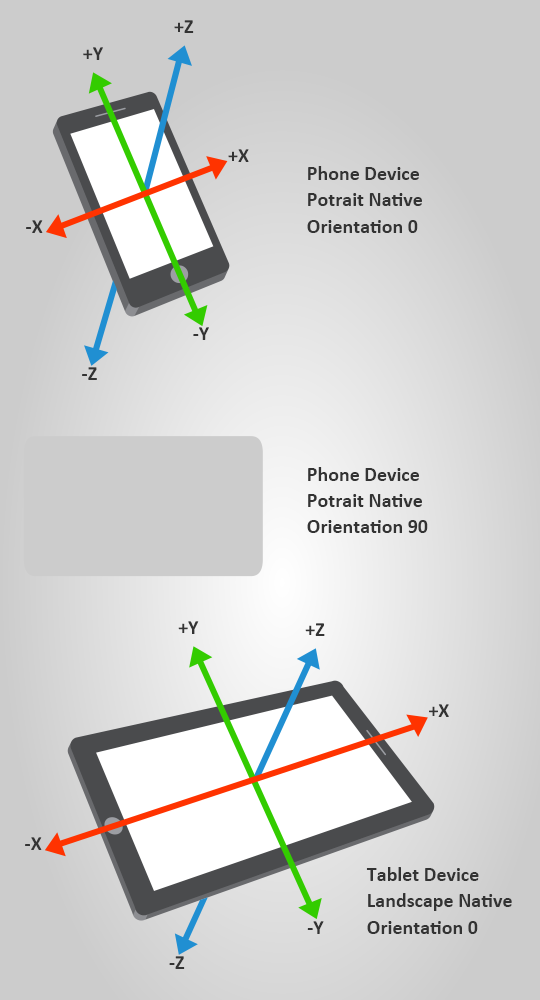
<style>
.page{position:relative;width:540px;height:1000px;background:#cccccc}
.page>*{position:absolute;margin:0}
.t1{font:20px "Calibri-Bold";color:#333333}
.t2{font:20px/26.4px "Calibri-Bold";color:#333333}
</style>
<div class="page">
<p class="t1" style="left:174px;top:20px;width:20px;height:13px">+Z</p>
<p class="t1" style="left:83px;top:47px;width:20px;height:13px">+Y</p>
<p class="t1" style="left:228px;top:149px;width:21px;height:13px">+X</p>
<p class="t2" style="left:307px;top:166px;width:115px;height:67px">Phone Device<br>Potrait Native<br>Orientation 0</p>
<p class="t1" style="left:26px;top:220px;width:17px;height:13px">-X</p>
<p class="t1" style="left:193px;top:327px;width:16px;height:13px">-Y</p>
<p class="t1" style="left:82px;top:367px;width:15px;height:13px">-Z</p>
<p class="t2" style="left:307px;top:467px;width:121px;height:66px">Phone Device<br>Potrait Native<br>Orientation 90</p>
<p class="t1" style="left:178px;top:621px;width:21px;height:13px">+Y</p>
<p class="t1" style="left:305px;top:623px;width:20px;height:13px">+Z</p>
<p class="t1" style="left:429px;top:704px;width:20px;height:13px">+X</p>
<p class="t1" style="left:25px;top:837px;width:17px;height:13px">-X</p>
<p class="t2" style="left:366px;top:867px;width:146px;height:67px">Tablet Device<br>Landscape Native<br>Orientation 0</p>
<p class="t1" style="left:307px;top:921px;width:17px;height:13px">-Y</p>
<p class="t1" style="left:169px;top:956px;width:16px;height:13px">-Z</p>
</div>
